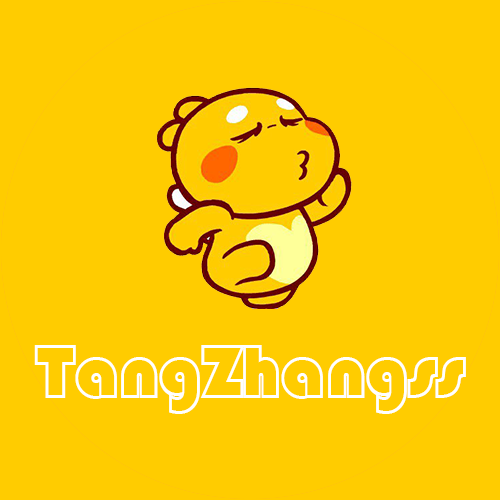
<style>
.page{position:relative;width:500px;height:500px;background:#ffcc00}
.page>*{position:absolute;margin:0}
.t1{font:75px "STCaiyun";color:#ffffff}
</style>
<div class="page">
<p class="t1" style="left:34px;top:345px;width:432px;height:69px">TangZhangss</p>
</div>
